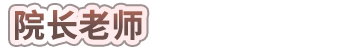
<style>
.page{position:relative;width:360px;height:50px;background:#ffffff}
.page>*{position:absolute;margin:0}
.t1{font:32px "SourceHanSansSC-Bold";color:#77544d;font-weight:bold}
</style>
<div class="page">
<p class="t1" style="left:15px;top:9px;width:128px;height:32px">院长老师</p>
</div>
